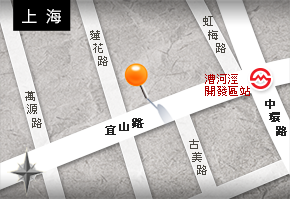
<style>
.page{position:relative;width:290px;height:199px}
.page>*{position:absolute;margin:0}
.t1{font:16px "MicrosoftJhengHeiRegular";color:#ffffff;text-transform:uppercase}
.t2{font:11px/13.2px "PMingLiU";color:#4b4842;text-transform:uppercase}
.t3{font:11px/11.4px "PMingLiU";letter-spacing:0.1em;color:#ae0000;text-transform:uppercase}
.t4{font:11px/13.2px "PMingLiU";color:#232323;text-transform:uppercase;font-weight:bold}
.t5{font:11px "PMingLiU";letter-spacing:0.2em;color:#232323;text-transform:uppercase;font-weight:bold}
</style>
<div class="page">
<p class="t1" style="left:22px;top:9px;width:39px;height:15px">上  海</p>
<p class="t2" style="left:203px;top:16px;width:23px;height:37px">虹<br>  梅<br>     路</p>
<p class="t2" style="left:90px;top:30px;width:18px;height:36px">蓮<br> 花<br>   路</p>
<p class="t3" style="left:205px;top:74px;width:45px;height:22px">漕河涇<br>開發區站</p>
<p class="t2" style="left:25px;top:91px;width:17px;height:37px">萬<br> 源<br>   路</p>
<p class="t4" style="left:265px;top:99px;width:22px;height:37px">中<br> 環<br>   路</p>
<p class="t5" style="left:105px;top:118px;width:39px;height:17px;rotate:1deg">宜山路</p>
<p class="t2" style="left:189px;top:139px;width:18px;height:36px">古<br> 美<br>   路</p>
</div>
